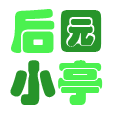
<style>
.page{position:relative;width:114px;height:114px;background:#ffffff}
.page>*{position:absolute;margin:0}
.t1{font:48px "STHupo";color:#4bf14f}
.t2{font:48px "STHupo";color:#27942a}
</style>
<div class="page">
<p class="t1" style="left:11px;top:9px;width:91px;height:44px">后<span class="t2">园</span></p>
<p class="t2" style="left:10px;top:60px;width:93px;height:45px">小<span class="t1">亭</span></p>
</div>
